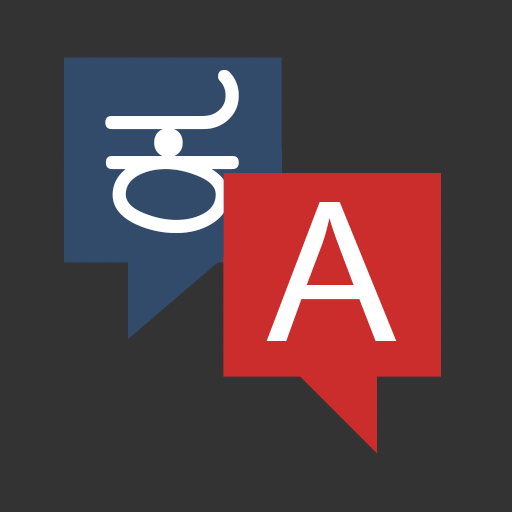
<style>
.page{position:relative;width:512px;height:512px;background:#333333}
.page>*{position:absolute;margin:0}
.t1{font:260px "NudiUni04k";color:#ffffff}
.t2{font:220px "BRHLatin";color:#ffffff}
</style>
<div class="page">
<p class="t1" style="left:105px;top:70px;width:134px;height:163px">ಕ</p>
<p class="t2" style="left:266px;top:202px;width:131px;height:139px">A</p>
</div>
